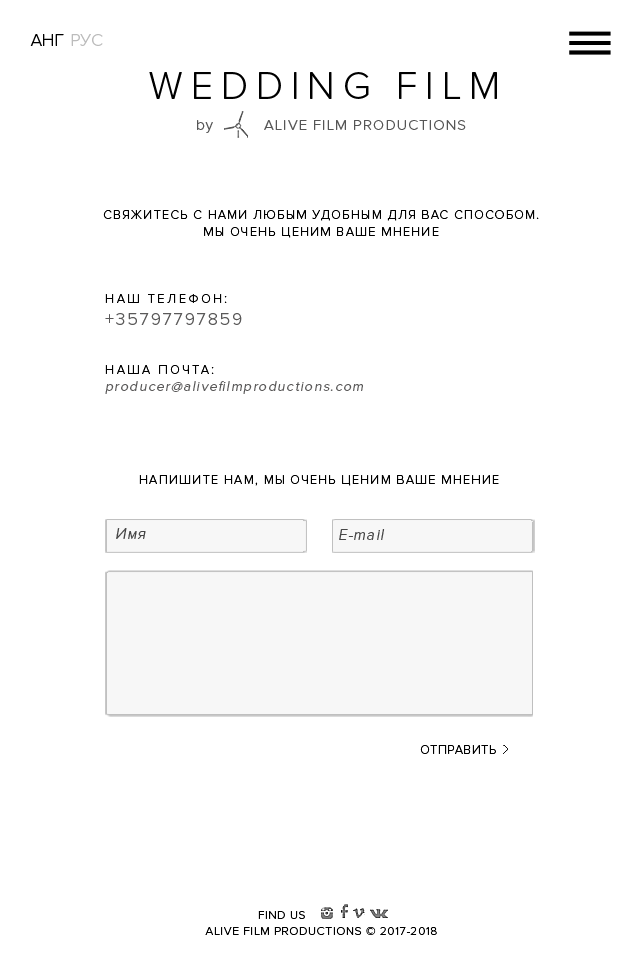
<style>
.page{position:relative;width:640px;height:960px;background:#ffffff}
.page>*{position:absolute;margin:0}
.t1{font:17.8px "ProximaNova-Light";color:#000000;text-transform:uppercase}
.t2{font:17.8px "ProximaNova-Light";color:#bcbcbc;text-transform:uppercase}
.t3{font:39.2px "ProximaNova-Light";letter-spacing:0.2em;color:#000000;text-transform:uppercase}
.t4{font:14.9px "ProximaNova-Light";letter-spacing:0.075em;color:#565656}
.t5{font:12.7px/17.8px "ProximaNova-Light";letter-spacing:0.1em;color:#000000;text-transform:uppercase}
.t6{font:14px "ProximaNova-Light";letter-spacing:0.1em;color:#5a5959;font-style:italic}
.t7{font:12.7px/25.4px "ProximaNova-Light";letter-spacing:0.2em;color:#000000;text-transform:uppercase}
.t8{font:18px "ProximaNova-Light";letter-spacing:0.1em;color:#5a5959;text-transform:uppercase}
.t9{font:12.7px "ProximaNova-Light";letter-spacing:0.2em;color:#000000;text-transform:uppercase}
.t10{font:12.7px "ProximaNova-Light";letter-spacing:0.1em;color:#000000;text-transform:uppercase}
.t11{font:15.2px "ProximaNova-Light";letter-spacing:0.075em;color:#464646;font-style:italic}
.t12{font:12.7px "ProximaNova-Light";letter-spacing:0.05em;color:#000000;text-transform:uppercase}
.t13{font:12px "ProximaNova-Light";letter-spacing:0.05em;color:#000000}
.t14{font:12px "Tahoma";letter-spacing:0.05em;color:#000000}
</style>
<div class="page">
<p class="t1" style="left:30px;top:34px;width:34px;height:12px">анг</p>
<p class="t2" style="left:71px;top:34px;width:32px;height:12px">рус</p>
<p class="t3" style="left:149px;top:72px;width:348px;height:27px">Wedding FILM</p>
<p class="t4" style="left:197px;top:120px;width:269px;height:13px">by          ALIVE FILM PRODUCTIONS</p>
<p class="t5" style="left:103px;top:210px;width:436px;height:28px;text-align:center">свяжитесь с нами любым удобным для вас способом.<br>Мы очень ценим ваше мнение</p>
<p class="t6" style="left:105px;top:294px;width:258px;height:100px"><span class="t7">наш телефон:<br></span><span class="t8">+35797797859<br><br><br></span><span class="t9">наша почта:<br></span>producer@alivefilmproductions.com</p>
<p class="t10" style="left:139px;top:475px;width:360px;height:11px">напишите нам, мы очень ценим ваше мнение</p>
<p class="t11" style="left:116px;top:528px;width:30px;height:11px">Имя</p>
<p class="t11" style="left:339px;top:529px;width:46px;height:11px">E-mail</p>
<p class="t12" style="left:420px;top:745px;width:76px;height:9px">отправить</p>
<p class="t13" style="left:258px;top:911px;width:47px;height:8px"><span class="t14">      </span>FIND US</p>
<p class="t13" style="left:205px;top:927px;width:232px;height:8px">ALIVE FILM PRODUCTIONS © 2017-2018</p>
</div>
